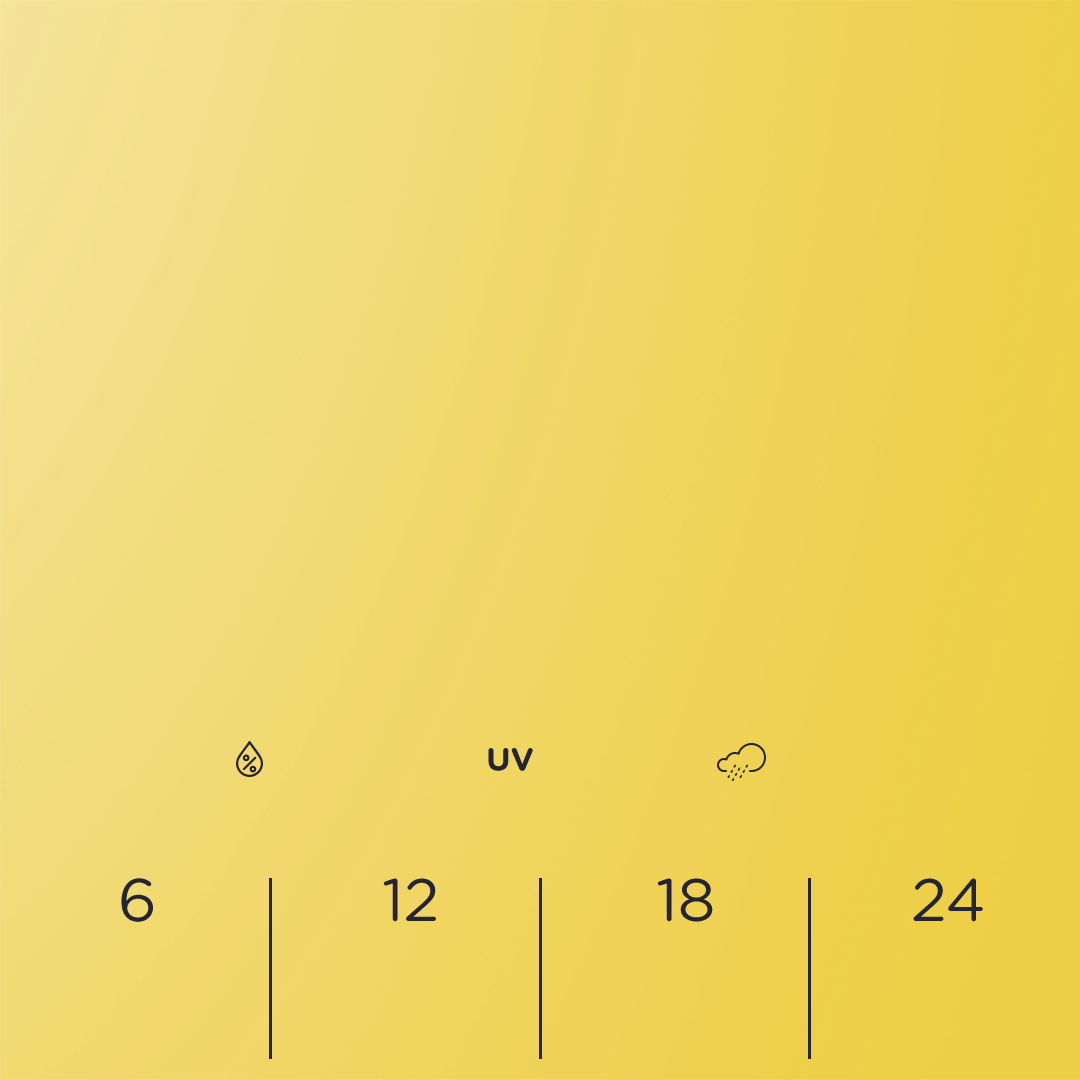
<style>
.page{position:relative;width:1080px;height:1080px}
.page>*{position:absolute;margin:0}
.t1{font:31.9px "GothamRounded-Bold";color:#242433;text-transform:uppercase}
.t2{font:60px "GothamRounded-Book";color:#242433;text-transform:uppercase}
</style>
<div class="page">
<p class="t1" style="left:488px;top:748px;width:45px;height:23px">UV</p>
<p class="t2" style="left:121px;top:878px;width:32px;height:44px">6</p>
<p class="t2" style="left:383px;top:878px;width:53px;height:44px">12</p>
<p class="t2" style="left:657px;top:878px;width:56px;height:44px">18</p>
<p class="t2" style="left:913px;top:878px;width:70px;height:44px">24</p>
</div>
